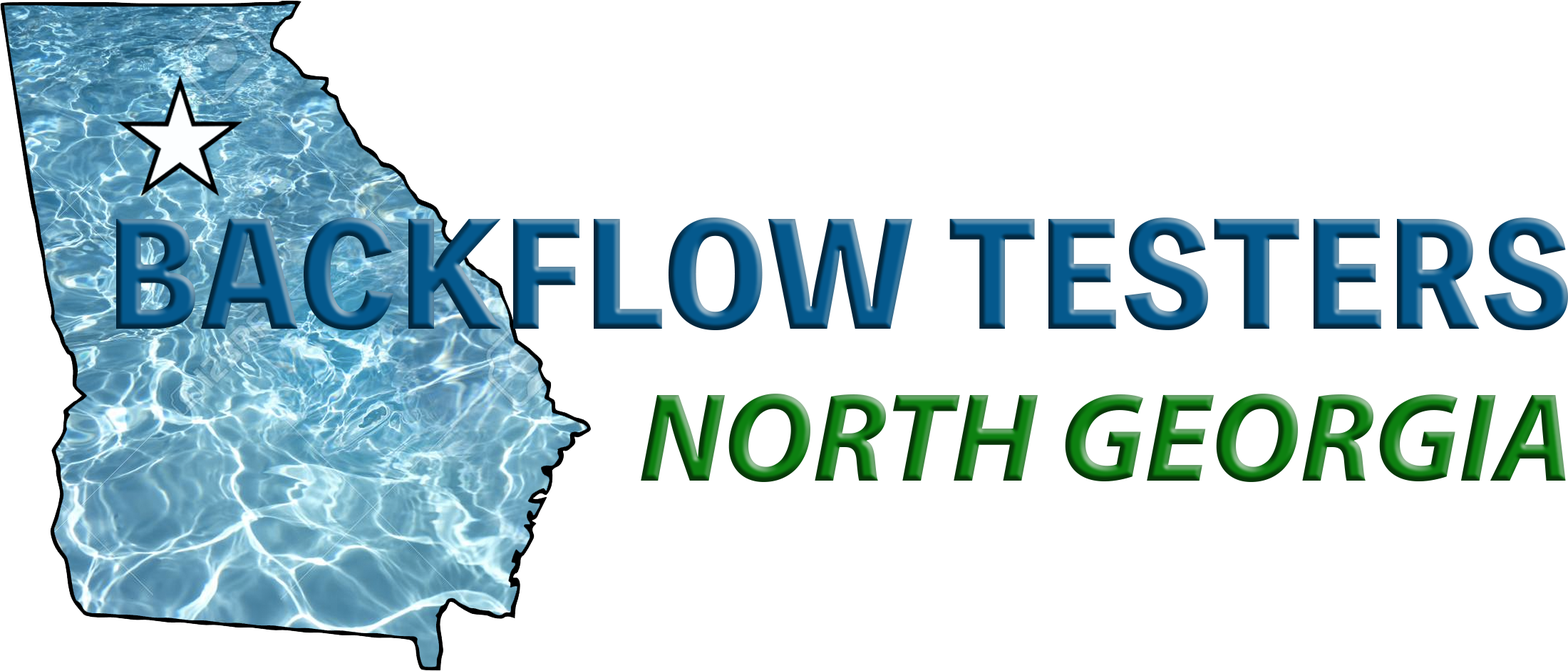
<style>
.page{position:relative;width:1568px;height:671px;background:#ffffff}
.page>*{position:absolute;margin:0}
.t1{font:141.1px "ToppanBunkyuMidashiGothicStdN-ExtraBold"}
.t2{font:126.9px "MyriadPro-BoldIt"}
</style>
<div class="page">
<p class="t1" style="left:116px;top:217px;width:1452px;height:265px;text-align:right">BACKFLOW TESTERS<br><span class="t2">NORTH GEORGIA</span></p>
</div>
